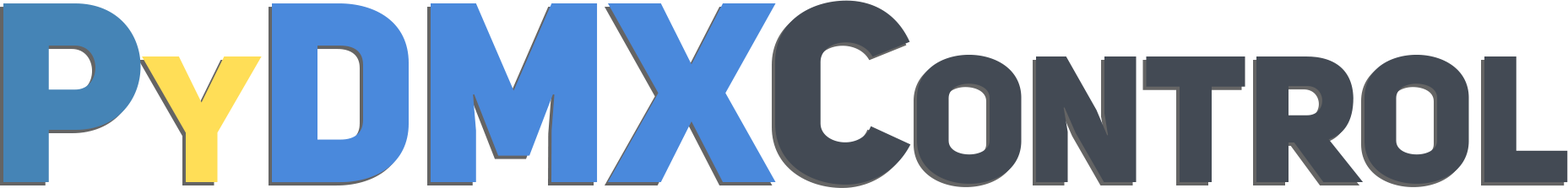
<style>
.page{position:relative;width:1568px;height:188px;background:#ffffff}
.page>*{position:absolute;margin:0}
.t1{font:253.3px "UniSansHeavyCAPS";letter-spacing:-0.01em;color:#434a54;font-variant:small-caps}
.t2{font:253.3px "UniSansHeavyCAPS";letter-spacing:-0.01em;color:#4584b6;font-variant:small-caps}
.t3{font:253.3px "UniSansHeavyCAPS";letter-spacing:-0.01em;color:#ffde57;font-variant:small-caps}
.t4{font:253.3px "UniSansHeavyCAPS";letter-spacing:-0.01em;color:#4a89dc;font-variant:small-caps}
</style>
<div class="page">
<p class="t1" style="left:3px;top:0px;width:1565px;height:185px"><span class="t2">P</span><span class="t3">y</span><span class="t4">DMX</span>Control</p>
</div>
